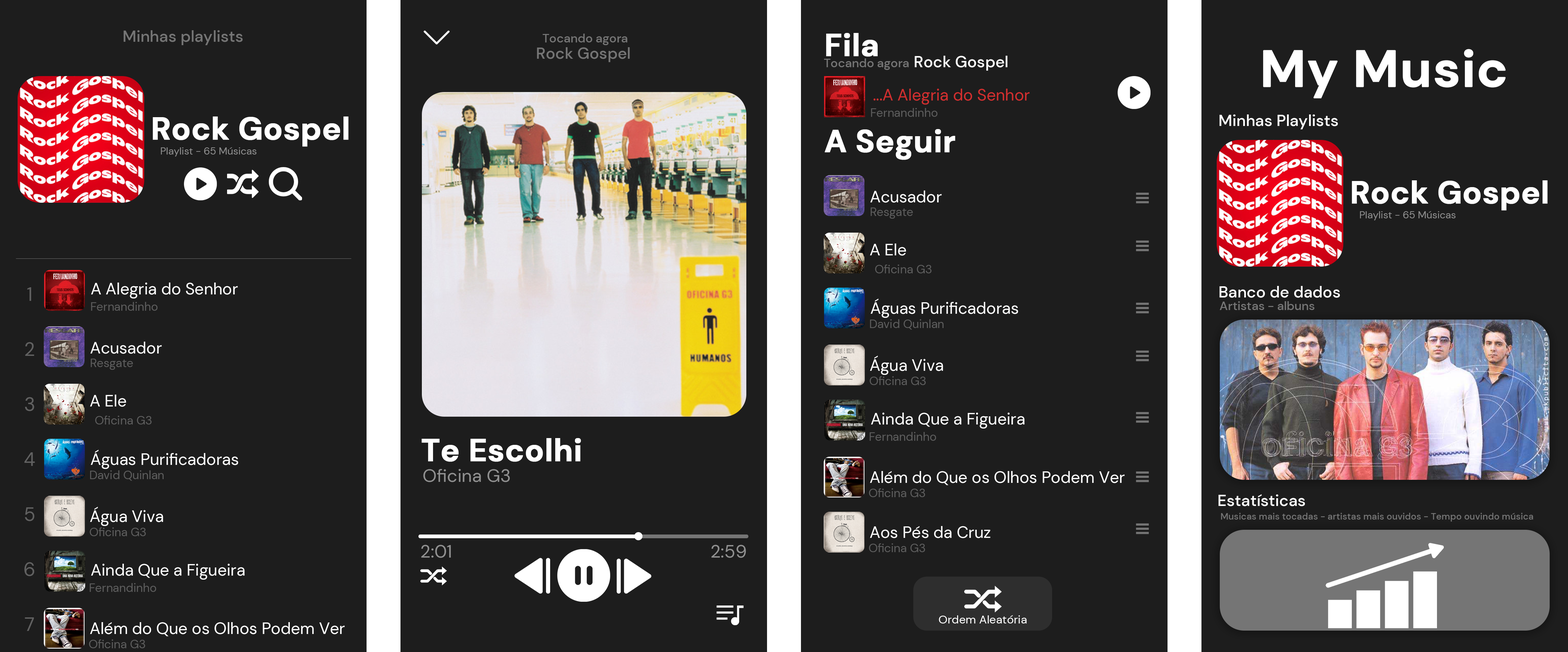
<style>
.page{position:relative;width:1568px;height:652px;background:#1d1d1d}
.page>*{position:absolute;margin:0}
.t1{font:16px "DMSans-Medium";color:#757575}
.t2{font:12.1px "DMSans-Medium";color:#757575}
.t3{font:31.5px "DMSans-Bold";color:#ffffff;font-weight:bold}
.t4{font:51.7px "DMSans-Bold";color:#ffffff;font-weight:bold}
.t5{font:16px "DMSans-Medium";color:#ffffff}
.t6{font:16.2px "DMSans-Regular";color:#d22f2f}
.t7{font:11.8px "DMSans-Regular";color:#5d5d5d}
.t8{font:10.1px "DMSans-Regular";color:#909090}
.t9{font:16.2px "DMSans-Regular";color:#ffffff}
.t10{font:19px/55px "DMSans-Regular";color:#616161}
.t11{font:18.1px "DMSans-Regular";color:#909090}
.t12{font:9.3px "DMSans-Medium";color:#757575}
.t13{font:11.6px "DMSans-Regular";color:#ffffff}
</style>
<div class="page">
<p class="t1" style="left:124px;top:30px;width:119px;height:15px">Minhas playlists</p>
<p class="t2" style="left:543px;top:34px;width:85px;height:11px">Tocando agora</p>
<p class="t3" style="left:826px;top:33px;width:52px;height:24px">Fila</p>
<p class="t1" style="left:537px;top:47px;width:93px;height:15px">Rock Gospel</p>
<p class="t4" style="left:1263px;top:49px;width:243px;height:49px">My Music</p>
<p class="t2" style="left:824px;top:58px;width:85px;height:12px">Tocando agora</p>
<p class="t5" style="left:915px;top:56px;width:93px;height:15px">Rock Gospel</p>
<p class="t6" style="left:873px;top:89px;width:157px;height:16px">...A Alegria do Senhor</p>
<p class="t7" style="left:871px;top:108px;width:66px;height:9px">Fernandinho</p>
<p class="t3" style="left:153px;top:116px;width:196px;height:31px">Rock Gospel</p>
<p class="t5" style="left:1219px;top:114px;width:119px;height:15px">Minhas Playlists</p>
<p class="t3" style="left:825px;top:129px;width:130px;height:31px">A Seguir</p>
<p class="t8" style="left:161px;top:147px;width:96px;height:9px">Playlist - 65 Músicas</p>
<p class="t3" style="left:1352px;top:180px;width:196px;height:30px">Rock Gospel</p>
<p class="t9" style="left:870px;top:190px;width:72px;height:13px">Acusador</p>
<p class="t7" style="left:871px;top:207px;width:42px;height:12px">Resgate</p>
<p class="t8" style="left:1360px;top:211px;width:96px;height:9px">Playlist - 65 Músicas</p>
<p class="t9" style="left:870px;top:243px;width:36px;height:13px">A Ele</p>
<p class="t7" style="left:875px;top:264px;width:57px;height:9px">Oficina G3</p>
<p class="t10" style="left:24px;top:287px;width:11px;height:344px;text-align:center">1<br>2<br>3<br>4<br>5<br>6<br>7</p>
<p class="t9" style="left:91px;top:282px;width:147px;height:16px">A Alegria do Senhor</p>
<p class="t5" style="left:1219px;top:286px;width:121px;height:12px">Banco de dados</p>
<p class="t7" style="left:91px;top:302px;width:66px;height:9px">Fernandinho</p>
<p class="t9" style="left:871px;top:298px;width:147px;height:20px">Águas Purificadoras</p>
<p class="t2" style="left:1219px;top:301px;width:95px;height:9px">Artistas - albuns</p>
<p class="t7" style="left:870px;top:319px;width:74px;height:11px">David Quinlan</p>
<p class="t9" style="left:90px;top:341px;width:72px;height:13px">Acusador</p>
<p class="t7" style="left:91px;top:358px;width:42px;height:12px">Resgate</p>
<p class="t9" style="left:870px;top:355px;width:73px;height:20px">Água Viva</p>
<p class="t7" style="left:870px;top:376px;width:56px;height:9px">Oficina G3</p>
<p class="t9" style="left:90px;top:394px;width:36px;height:13px">A Ele</p>
<p class="t9" style="left:871px;top:412px;width:154px;height:16px">Ainda Que a Figueira</p>
<p class="t7" style="left:95px;top:415px;width:57px;height:9px">Oficina G3</p>
<p class="t3" style="left:422px;top:438px;width:159px;height:24px">Te Escolhi</p>
<p class="t7" style="left:870px;top:432px;width:66px;height:9px">Fernandinho</p>
<p class="t9" style="left:91px;top:449px;width:147px;height:20px">Águas Purificadoras</p>
<p class="t7" style="left:90px;top:470px;width:74px;height:11px">David Quinlan</p>
<p class="t11" style="left:423px;top:469px;width:87px;height:13px">Oficina G3</p>
<p class="t9" style="left:870px;top:471px;width:255px;height:14px">Além do Que os Olhos Podem Ver</p>
<p class="t7" style="left:869px;top:488px;width:56px;height:9px">Oficina G3</p>
<p class="t5" style="left:1218px;top:494px;width:87px;height:12px">Estatísticas</p>
<p class="t9" style="left:90px;top:506px;width:73px;height:20px">Água Viva</p>
<p class="t12" style="left:1221px;top:512px;width:312px;height:9px">Musicas mais tocadas - artistas mais ouvidos - Tempo ouvindo música</p>
<p class="t7" style="left:90px;top:527px;width:56px;height:9px">Oficina G3</p>
<p class="t9" style="left:870px;top:526px;width:120px;height:12px">Aos Pés da Cruz</p>
<p class="t11" style="left:421px;top:544px;width:30px;height:14px">2:01</p>
<p class="t11" style="left:711px;top:544px;width:35px;height:14px">2:59</p>
<p class="t7" style="left:869px;top:543px;width:56px;height:9px">Oficina G3</p>
<p class="t9" style="left:91px;top:563px;width:154px;height:16px">Ainda Que a Figueira</p>
<p class="t7" style="left:90px;top:583px;width:66px;height:9px">Fernandinho</p>
<p class="t13" style="left:939px;top:615px;width:88px;height:8px">Ordem Aleatória</p>
<p class="t9" style="left:90px;top:622px;width:255px;height:14px">Além do Que os Olhos Podem Ver</p>
<p class="t7" style="left:89px;top:639px;width:56px;height:9px">Oficina G3</p>
</div>
